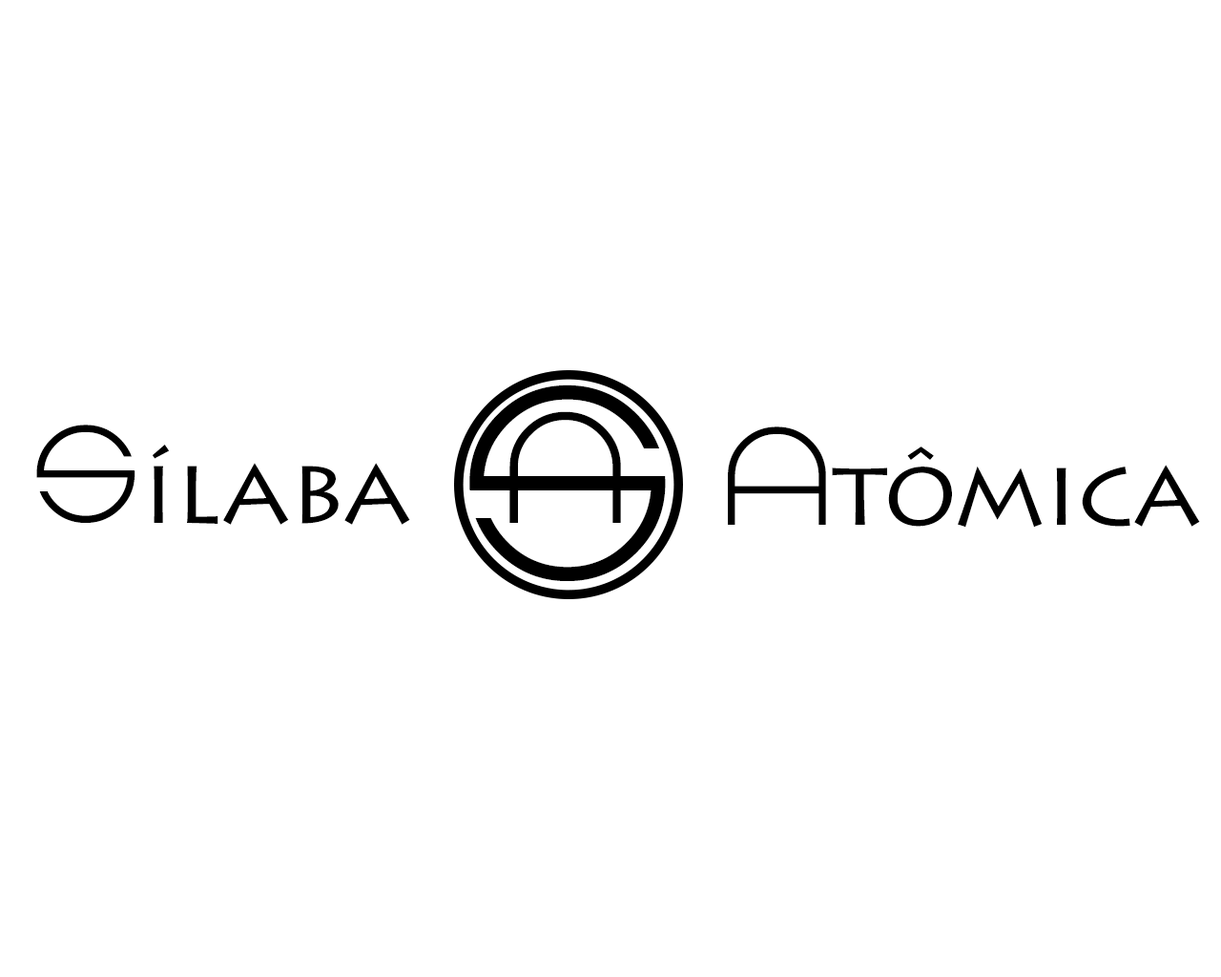
<style>
.page{position:relative;width:1221px;height:977px;background:#ffffff}
.page>*{position:absolute;margin:0}
.t1{font:286.1px "ZdykLibra";color:#000000}
.t2{font:162.1px "ZdykLibra";color:#000000}
.t3{font:95.4px "LithosPro-Regular";color:#000000}
.t4{font:143.1px "ZdykLibra";color:#000000}
</style>
<div class="page">
<p class="t1" style="left:469px;top:384px;width:197px;height:197px">S</p>
<p class="t2" style="left:509px;top:411px;width:112px;height:112px">A</p>
<p class="t3" style="left:36px;top:424px;width:374px;height:101px"><span class="t4">S</span>ílaba</p>
<p class="t3" style="left:728px;top:426px;width:472px;height:101px"><span class="t4">A</span>tômica</p>
</div>
